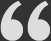
<style>
.page{position:relative;width:51px;height:41px;background:#dddddd}
.page>*{position:absolute;margin:0}
.t1{font:157.8px "AdobeKaitiStd-Regular";color:#dddddd}
</style>
<div class="page">
<p class="t1" style="left:0px;top:0px;width:24px;height:41px">‘</p>
<p class="t1" style="left:27px;top:0px;width:24px;height:41px">‘</p>
</div>
